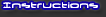
<style>
.page{position:relative;width:106px;height:17px}
.page>*{position:absolute;margin:0}
.t1{font:10px "ThundergodII";color:#ffffff}
</style>
<div class="page">
<p class="t1" style="left:3px;top:2px;width:95px;height:6px">Instructions</p>
</div>
